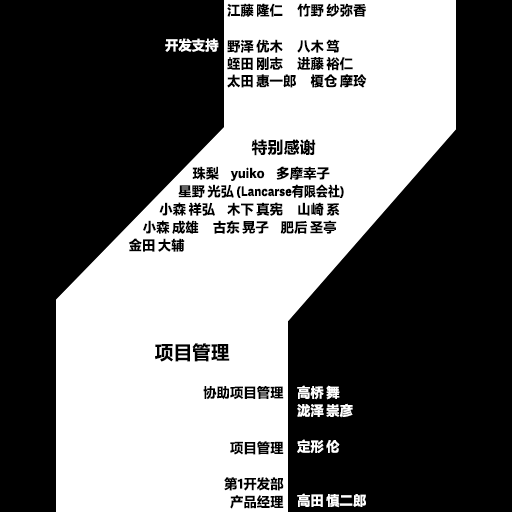
<style>
.page{position:relative;width:512px;height:512px;background:#000000}
.page>*{position:absolute;margin:0}
.t1{font:13.5px/17.3px "FZLTHProGlobal-Bold";letter-spacing:0.005em;color:#000000}
.t2{font:13.5px/18.7px "FZLTHProGlobal-Bold";letter-spacing:0.005em;color:#000000}
.t3{font:13.5px "FZLTHProGlobal-Bold";letter-spacing:0.005em;color:#ffffff}
.t4{font:16.2px "FZLTHProGlobal-Bold";letter-spacing:0.005em;color:#000000}
.t5{font:13.5px/18px "FZLTHProGlobal-Bold";letter-spacing:0.005em;color:#000000}
.t6{font:13.5px/18px "FZLTHProGlobal-Bold";letter-spacing:0.005em;color:#000000;scale:0.89 1}
.t7{font:18.9px "FZLTHProGlobal-Bold";letter-spacing:0.005em;color:#000000}
.t8{font:13.5px/18px "FZLTHProGlobal-Bold";letter-spacing:0.005em;color:#ffffff}
.t9{font:13.5px/18.7px "FZLTHProGlobal-Bold";letter-spacing:0.005em;color:#ffffff}
</style>
<div class="page">
<p class="t1" style="left:227px;top:3px;width:140px;height:85px"><span class="t2">江藤 隆仁      竹野 纱弥香</span><br><br>野泽 优木      八木 笃<br>蛭田 刚志      进藤 裕仁<br>太田 惠一郎      榎仓 摩玲</p>
<p class="t3" style="left:165px;top:38px;width:54px;height:14px">开发支持</p>
<p class="t4" style="left:251px;top:139px;width:65px;height:17px">特别感谢</p>
<p class="t5" style="left:128px;top:166px;width:216px;height:86px">珠梨     yuiko     多摩幸子<br>                     星野 光弘 <span class="t6">(Lancarse有限会社)<br></span>             小森 祥弘     木下 真宪      山崎 系<br>      小森 成雄      古东 晃子     肥后 圣亭<br>金田 大辅</p>
<p class="t7" style="left:155px;top:343px;width:75px;height:19px">项目管理</p>
<p class="t5" style="left:203px;top:386px;width:81px;height:123px;text-align:right"><span class="t2"><br>协助项目管理<br><br></span><br>项目管理<br><br>第1开发部<br>产品经理</p>
<p class="t8" style="left:297px;top:385px;width:69px;height:123px"><span class="t9"><br></span>高桥 舞<br>泷泽 崇彦<br><br>定形 伦<br><br><br>高田 慎二郎</p>
</div>
